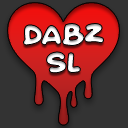
<style>
.page{position:relative;width:128px;height:128px;background:#333333}
.page>*{position:absolute;margin:0}
.t1{font:24px "QuickLove"}
</style>
<div class="page">
<p class="t1" style="left:23px;top:23px;width:81px;height:50px;text-align:center">DABZ<br>SL</p>
</div>
